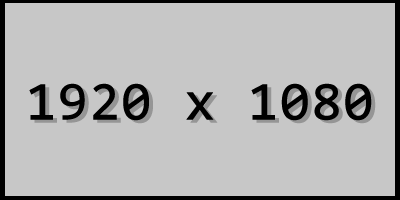
<style>
.page{position:relative;width:400px;height:200px;background:#c7c7c7}
.page>*{position:absolute;margin:0}
.t1{font:55px "Consolas";color:#000000;font-weight:bold}
</style>
<div class="page">
<p class="t1" style="left:29px;top:83px;width:343px;height:38px">1920 x 1080</p>
</div>
